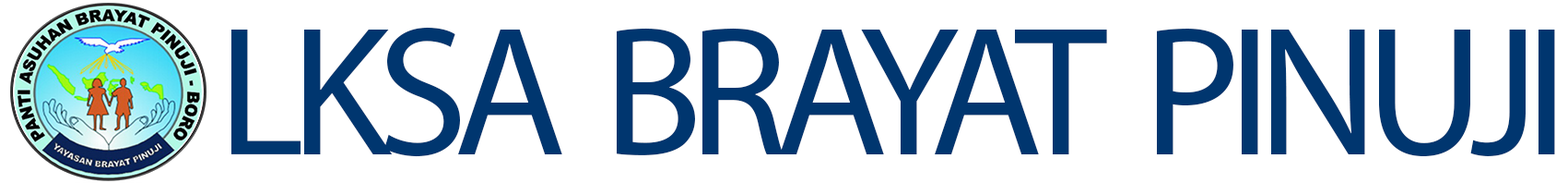
<style>
.page{position:relative;width:1568px;height:183px;background:#ffffff}
.page>*{position:absolute;margin:0}
.t1{font:184.4px "MyriadPro-Regular";letter-spacing:-0.075em;color:#00366f;text-transform:uppercase}
.t2{font:66.6px "MyriadPro-Regular";letter-spacing:-0.075em;color:#00366f;text-transform:uppercase}
</style>
<div class="page">
<p class="t1" style="left:231px;top:27px;width:1324px;height:130px"><span class="t2"> </span>lksa  Brayat  Pinuji</p>
</div>
